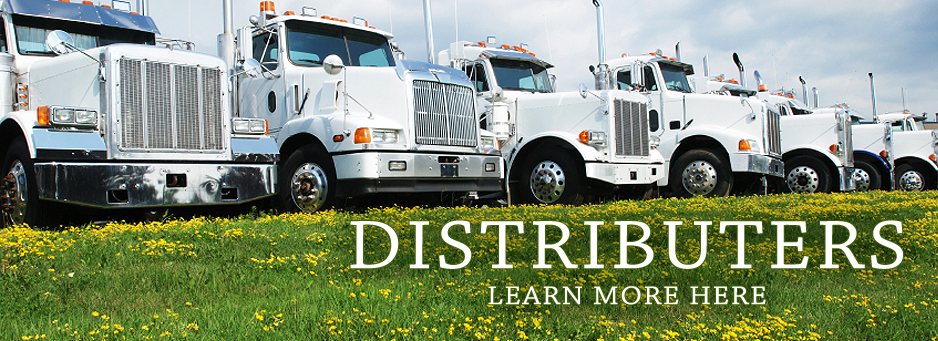
<style>
.page{position:relative;width:938px;height:341px}
.page>*{position:absolute;margin:0}
.t1{font:27px/36px "ChaparralPro-Regular";letter-spacing:0.05em;color:#ffffff;text-transform:uppercase;scale:1.11 1}
.t2{font:72px/36px "ChaparralPro-Regular";letter-spacing:0.05em;color:#ffffff;text-transform:uppercase;scale:1.11 1}
</style>
<div class="page">
<p class="t1" style="left:350px;top:220px;width:553px;height:85px;text-align:center"><span class="t2">DISTRIBUTERS<br></span>Learn more here</p>
</div>
